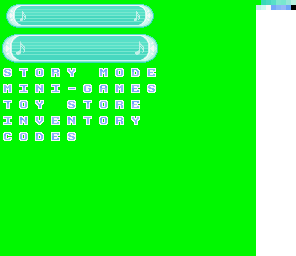
<style>
.page{position:relative;width:296px;height:256px;background:#00f800}
.page>*{position:absolute;margin:0}
.t1{font:8px/16px "Pixelchunk";letter-spacing:1em;color:#70a8f8}
.t2{font:8px/16px "Pixelchunk";letter-spacing:1em;color:#70a8f8;text-transform:uppercase}
</style>
<div class="page">
<p class="t1" style="left:4px;top:69px;width:151px;height:71px">STORY MODE<br>MINI-GAMES<br>TOY STORE<br><span class="t2">Inventory<br>CODES</span></p>
</div>
